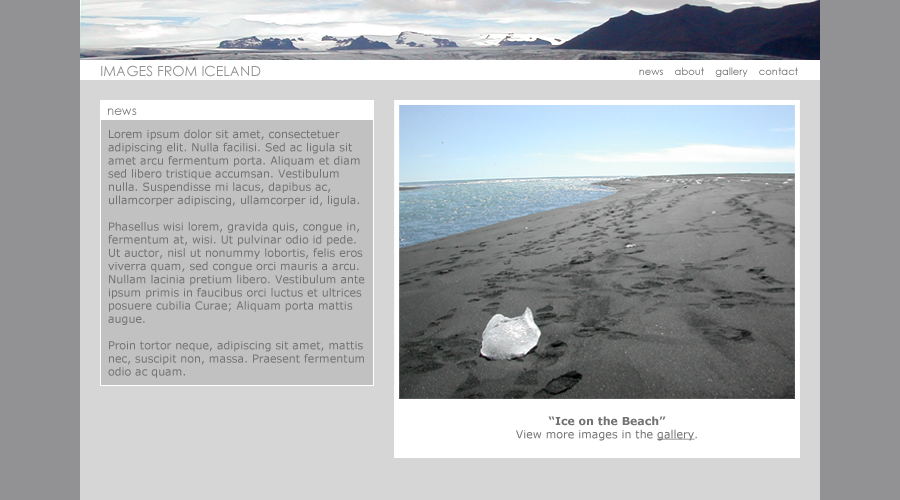
<style>
.page{position:relative;width:900px;height:500px}
.page>*{position:absolute;margin:0}
.t1{font:14px "CenturyGothic";color:#929194}
.t2{font:10px "CenturyGothic";color:#737373}
.t3{font:12px "CenturyGothic";color:#737373}
.t4{font:11px "Verdana";color:#737373}
.t5{font:11px "Verdana-Bold";color:#737373}
.t6{font:11px "Verdana";color:#737373;text-decoration:underline}
</style>
<div class="page">
<p class="t1" style="left:101px;top:65px;width:160px;height:12px">IMAGES FROM ICELAND</p>
<p class="t2" style="left:639px;top:67px;width:159px;height:10px">news    about    gallery    contact</p>
<p class="t3" style="left:108px;top:108px;width:29px;height:7px">news</p>
<p class="t4" style="left:108px;top:129px;width:257px;height:249px">Lorem ipsum dolor sit amet, consectetuer <br>adipiscing elit. Nulla facilisi. Sed ac ligula sit <br>amet arcu fermentum porta. Aliquam et diam <br>sed libero tristique accumsan. Vestibulum <br>nulla. Suspendisse mi lacus, dapibus ac, <br>ullamcorper adipiscing, ullamcorper id, ligula. <br><br>Phasellus wisi lorem, gravida quis, congue in, <br>fermentum at, wisi. Ut pulvinar odio id pede. <br>Ut auctor, nisl ut nonummy lobortis, felis eros <br>viverra quam, sed congue orci mauris a arcu. <br>Nullam lacinia pretium libero. Vestibulum ante <br>ipsum primis in faucibus orci luctus et ultrices <br>posuere cubilia Curae; Aliquam porta mattis <br>augue. <br><br>Proin tortor neque, adipiscing sit amet, mattis <br>nec, suscipit non, massa. Praesent fermentum <br>odio ac quam.</p>
<p class="t4" style="left:516px;top:416px;width:181px;height:25px;text-align:center"><span class="t5">“Ice on the Beach”   <br></span>View more images in the <span class="t6">gallery</span>.</p>
</div>
